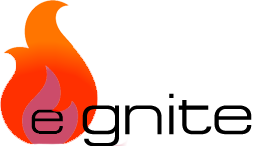
<style>
.page{position:relative;width:267px;height:146px;background:#ffffff}
.page>*{position:absolute;margin:0}
.t1{font:58.3px "MicroExtendFLF";color:#000000}
</style>
<div class="page">
<p class="t1" style="left:82px;top:93px;width:170px;height:54px">gnite</p>
</div>
